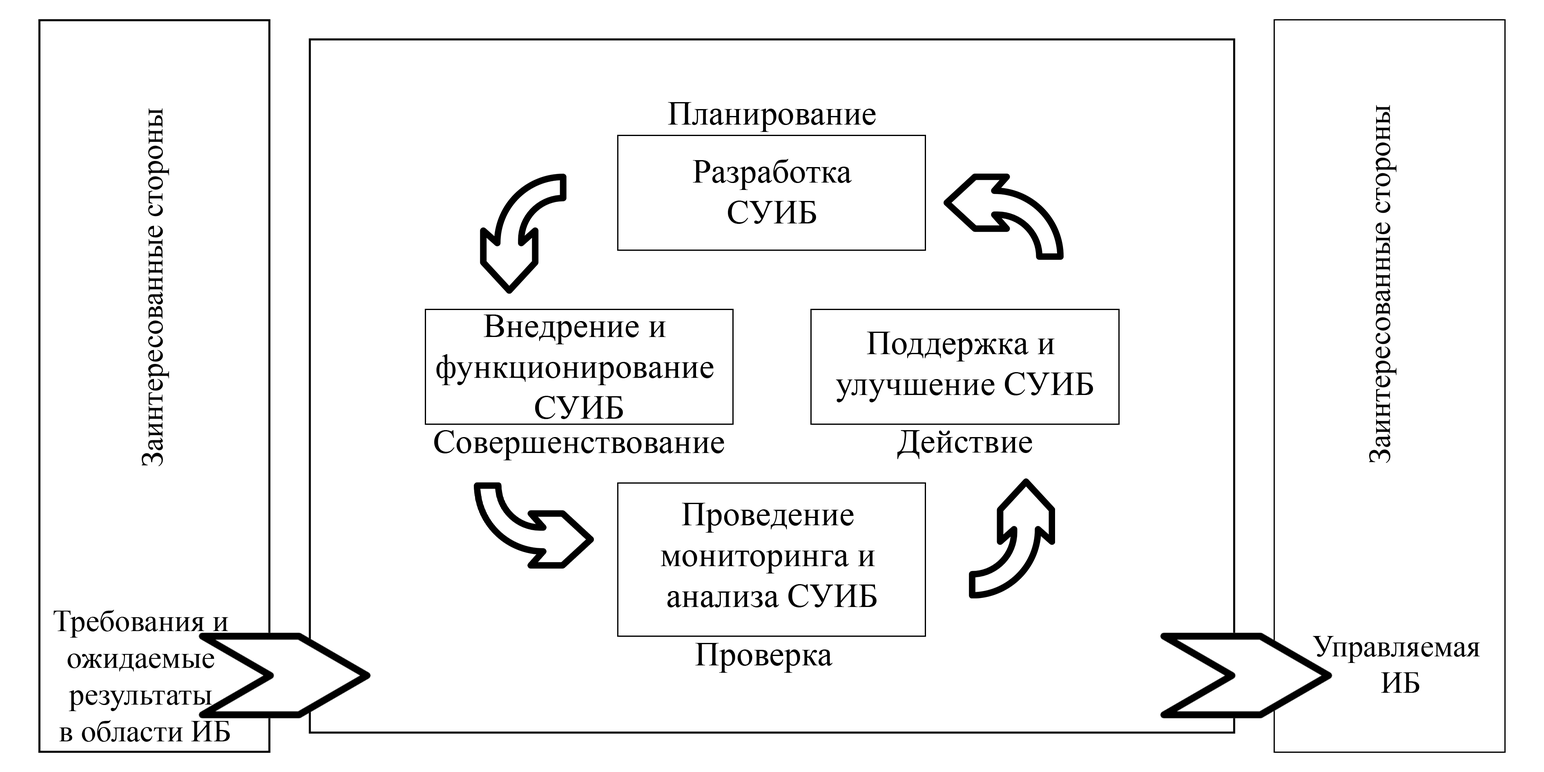
<style>
.page{position:relative;width:1544px;height:772px;background:#ffffff}
.page>*{position:absolute;margin:0}
.t1{font:30.6px "TimesNewRomanPSMT";color:#000000}
.t2{font:34px "TimesNewRomanPSMT";color:#000000}
</style>
<div class="page">
<p class="t1" style="left:142px;top:108px;width:27px;height:359px;rotate:-90deg">Заинтересованные стороны</p>
<p class="t2" style="left:668px;top:102px;width:208px;height:30px">Планирование</p>
<p class="t1" style="left:1369px;top:105px;width:28px;height:358px;rotate:-90deg">Заинтересованные стороны</p>
<p class="t2" style="left:693px;top:159px;width:159px;height:65px;text-align:center">Разработка<br>СУИБ</p>
<p class="t2" style="left:436px;top:315px;width:278px;height:104px;text-align:center">Внедрение и <br>функционирование <br>СУИБ</p>
<p class="t2" style="left:836px;top:332px;width:257px;height:70px;text-align:center">Поддержка и <br>улучшение СУИБ</p>
<p class="t2" style="left:434px;top:430px;width:290px;height:30px">Совершенствование</p>
<p class="t2" style="left:898px;top:430px;width:134px;height:29px">Действие</p>
<p class="t2" style="left:661px;top:503px;width:216px;height:105px;text-align:center">Проведение <br>мониторинга и <br>анализа СУИБ</p>
<p class="t1" style="left:54px;top:610px;width:176px;height:132px;text-align:center">Требования и <br>ожидаемые <br>результаты <br>в области ИБ</p>
<p class="t1" style="left:1313px;top:636px;width:167px;height:57px;text-align:center">Управляемая <br>ИБ</p>
<p class="t2" style="left:695px;top:643px;width:138px;height:30px">Проверка</p>
</div>
